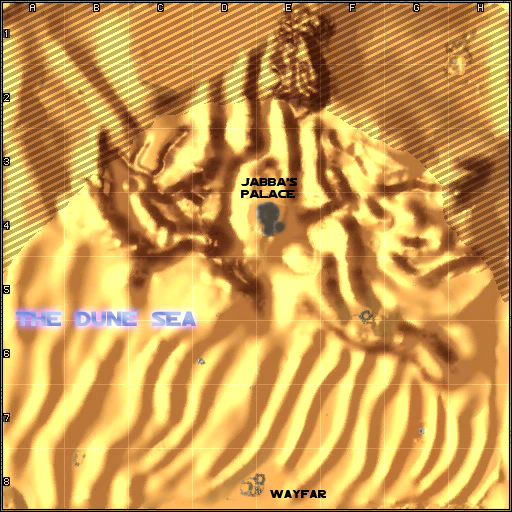
<style>
.page{position:relative;width:512px;height:512px}
.page>*{position:absolute;margin:0}
.t1{font:10px "JediSolidNormal";color:#020202}
.t2{font:18px "JediSolidNormal"}
.t3{font:10px "JediSolidNormal";color:#000000}
</style>
<div class="page">
<p class="t1" style="left:241px;top:178px;width:56px;height:20px">JABBA’s<br>PALACE</p>
<p class="t2" style="left:15px;top:311px;width:181px;height:15px">The Dune Sea</p>
<p class="t3" style="left:270px;top:490px;width:56px;height:8px">wayfar</p>
</div>
